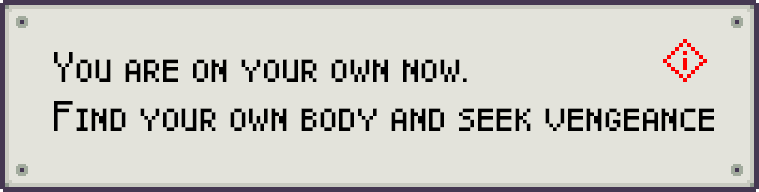
<style>
.page{position:relative;width:759px;height:192px;background:#e3e3db}
.page>*{position:absolute;margin:0}
.t1{font:30px/48.7px "Pixel-Caps";color:#000000}
</style>
<div class="page">
<p class="t1" style="left:54px;top:52px;width:660px;height:79px">You are on your own now.<br>Find your own body and seek vengeance</p>
</div>
